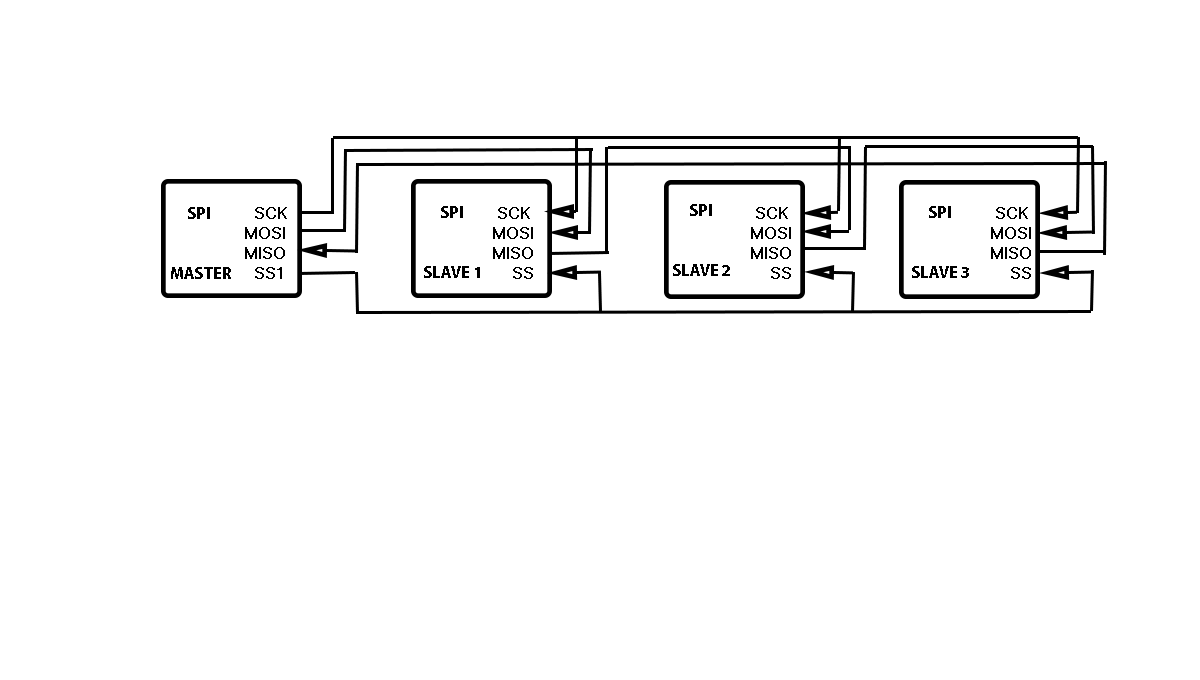
<style>
.page{position:relative;width:1200px;height:680px;background:#ffffff}
.page>*{position:absolute;margin:0}
.t1{font:16.7px "MyriadPro-Bold";color:#000000}
.t2{font:16.7px "MicrosoftSansSerif";color:#000000}
</style>
<div class="page">
<p class="t1" style="left:171px;top:207px;width:60px;height:72px">SPI<br><br><br>MASTER</p>
<p class="t2" style="left:245px;top:207px;width:42px;height:72px">SCK<br>MOSI<br>MISO<br>  SS1</p>
<p class="t1" style="left:424px;top:206px;width:56px;height:72px">SPI<br><br><br>SLAVE 1</p>
<p class="t2" style="left:493px;top:207px;width:40px;height:72px">SCK<br>MOSI<br>MISO<br>    SS</p>
<p class="t1" style="left:673px;top:204px;width:57px;height:72px">SPI<br><br><br>SLAVE 2</p>
<p class="t2" style="left:751px;top:207px;width:40px;height:72px">SCK<br>MOSI<br>MISO<br>    SS</p>
<p class="t1" style="left:912px;top:206px;width:57px;height:72px">SPI<br><br><br>SLAVE 3</p>
<p class="t2" style="left:991px;top:207px;width:40px;height:72px">SCK<br>MOSI<br>MISO<br>    SS</p>
</div>
